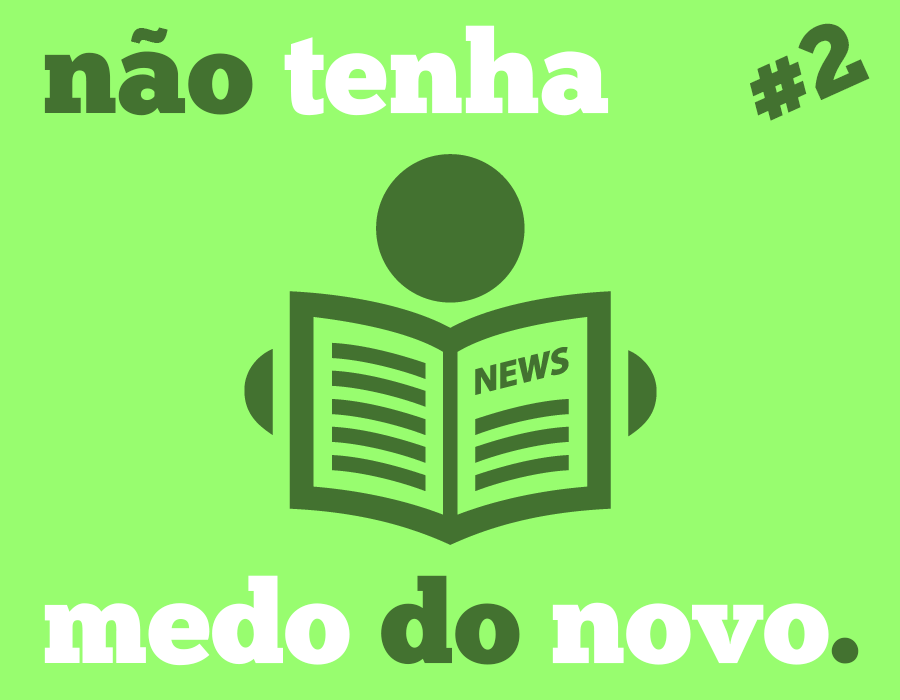
<style>
.page{position:relative;width:900px;height:700px;background:#98fd6f}
.page>*{position:absolute;margin:0}
.t1{font:116.3px "ChunkFive-Roman";color:#ffffff}
.t2{font:116.3px "ChunkFive-Roman";color:#437230}
.t3{font:84.9px "GothamUltra";color:#437230}
.t4{font:97.2px "ChunkFive-Roman";color:#437230}
</style>
<div class="page">
<p class="t1" style="left:44px;top:25px;width:565px;height:91px"><span class="t2">nao </span>tenha</p>
<p class="t3" style="left:131px;top:27px;width:37px;height:17px">~</p>
<p class="t4" style="left:750px;top:23px;width:120px;height:98px;rotate:-24deg">#2</p>
<p class="t1" style="left:44px;top:575px;width:815px;height:91px">medo<span class="t2"> do </span>novo<span class="t2">.</span></p>
</div>
